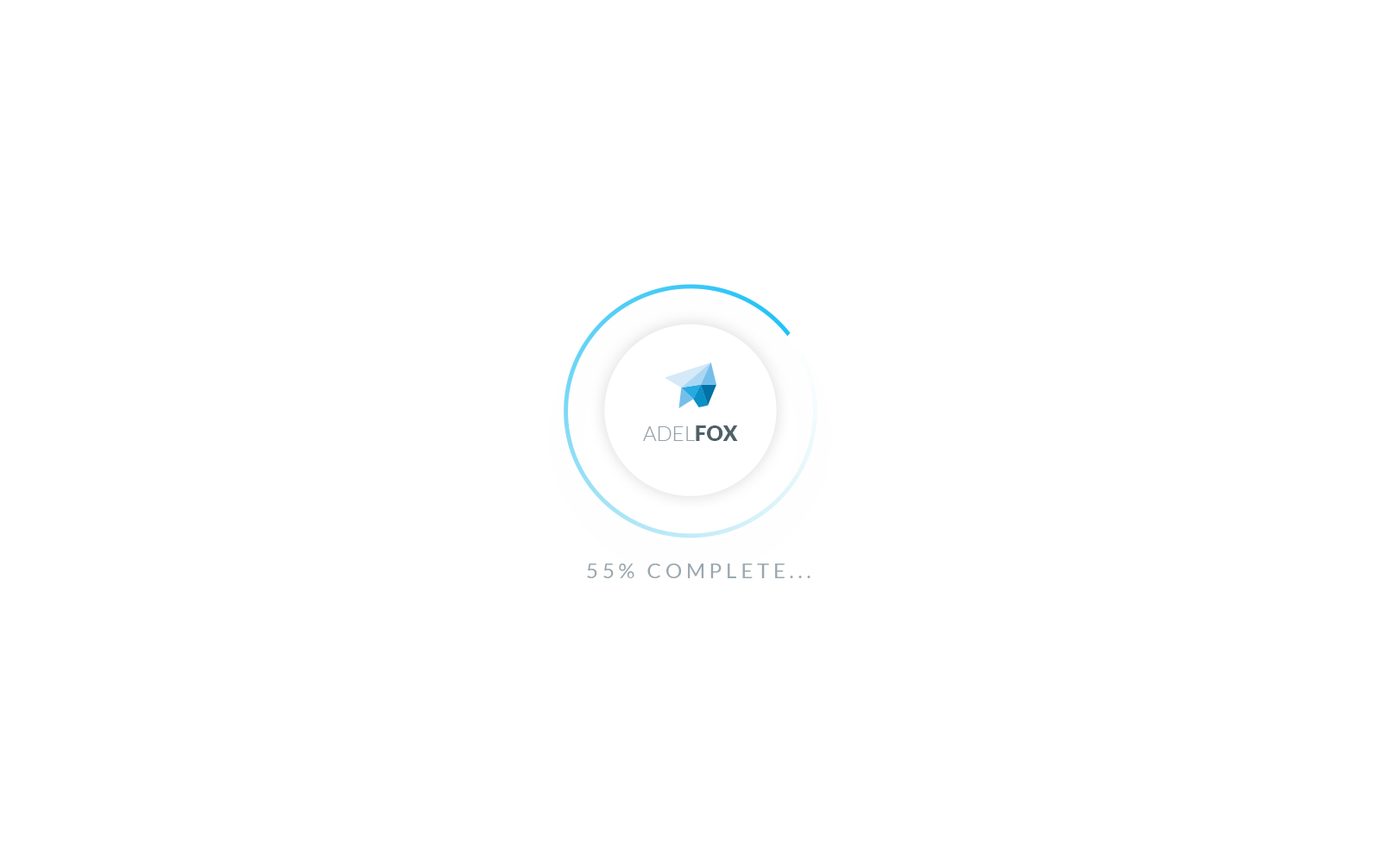
<style>
.page{position:relative;width:1381px;height:863px;background:#ffffff}
.page>*{position:absolute;margin:0}
.t1{font:20.7px "Lato-Light";color:#98a2a8;text-transform:uppercase}
.t2{font:20.7px "Lato-Black";color:#4f6168;text-transform:uppercase}
.t3{font:20.7px "Lato-Regular";letter-spacing:0.2em;color:#9aa7af;text-transform:uppercase}
</style>
<div class="page">
<p class="t1" style="left:643px;top:426px;width:95px;height:15px">adel<span class="t2">fox</span></p>
<p class="t3" style="left:587px;top:564px;width:224px;height:14px">55% Complete...</p>
</div>
